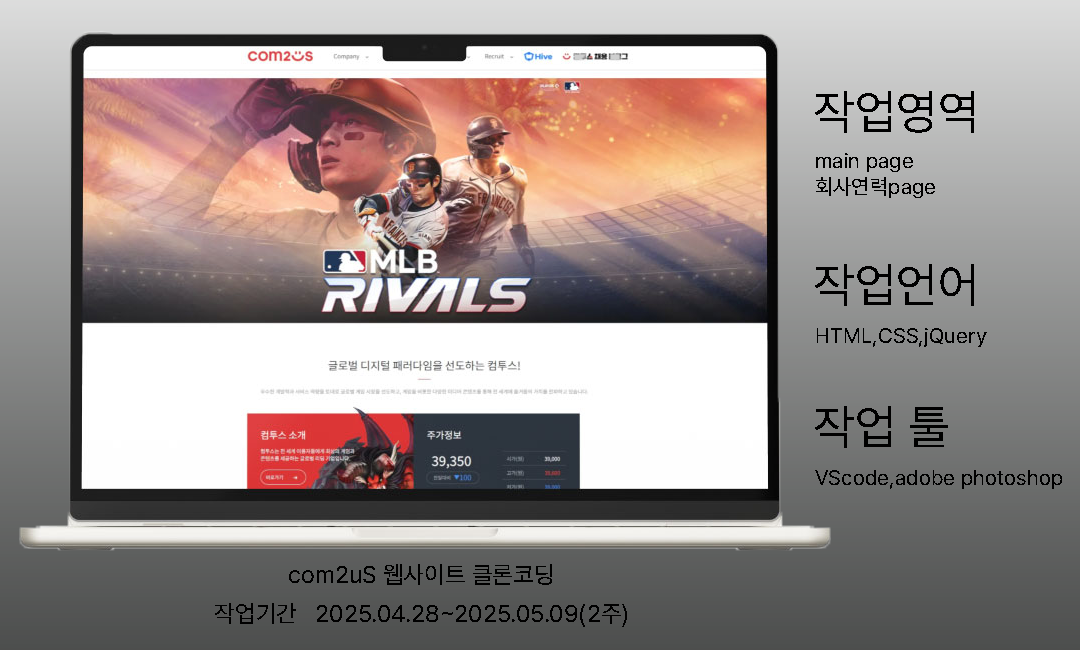
<style>
.page{position:relative;width:1080px;height:650px}
.page>*{position:absolute;margin:0}
.t1{font:48px "Pretendard-Regular";color:#000000}
.t2{font:21.3px "Pretendard-Regular";color:#000000}
.t3{font:24px "Pretendard-Regular";color:#000000}
</style>
<div class="page">
<p class="t1" style="left:815px;top:91px;width:159px;height:42px">작업영역</p>
<p class="t2" style="left:816px;top:153px;width:119px;height:45px">main page<br>회사연력page</p>
<p class="t1" style="left:815px;top:264px;width:159px;height:42px">작업언어</p>
<p class="t2" style="left:817px;top:328px;width:170px;height:19px">HTML,CSS,jQuery</p>
<p class="t1" style="left:815px;top:406px;width:133px;height:42px">작업 툴</p>
<p class="t2" style="left:815px;top:470px;width:247px;height:19px">VScode,adobe photoshop</p>
<p class="t3" style="left:289px;top:564px;width:263px;height:21px">com2uS 웹사이트 클론코딩</p>
<p class="t3" style="left:215px;top:603px;width:412px;height:24px">작업기간   2025.04.28~2025.05.09(2주)</p>
</div>
